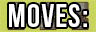
<style>
.page{position:relative;width:96px;height:32px;background:#ffffff}
.page>*{position:absolute;margin:0}
.t1{font:32.4px "BebasNeue";letter-spacing:0.04em;color:#ffffff}
</style>
<div class="page">
<p class="t1" style="left:9px;top:4px;width:78px;height:23px">moves:</p>
</div>
